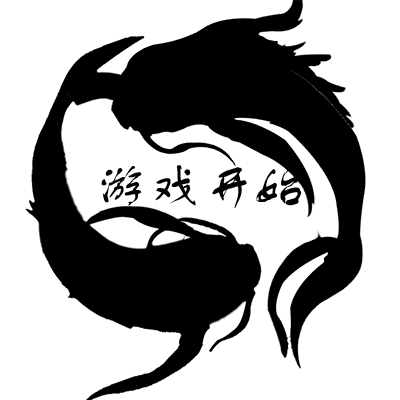
<style>
.page{position:relative;width:400px;height:400px;background:#ffffff}
.page>*{position:absolute;margin:0}
.t1{font:54px "FZSTK--GBK1-0";color:#010101}
</style>
<div class="page">
<p class="t1" style="left:101px;top:164px;width:201px;height:44px">游戏开始</p>
</div>
